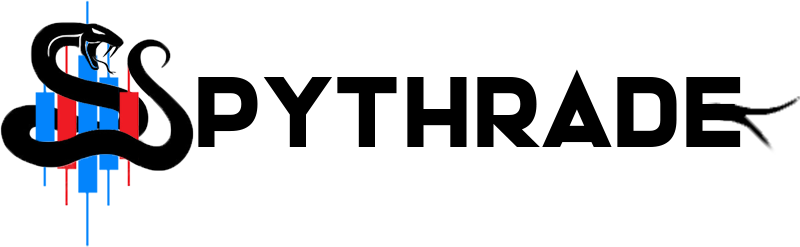
<style>
.page{position:relative;width:800px;height:247px;background:#ffffff}
.page>*{position:absolute;margin:0}
.t1{font:110px "Hardigan";color:#000000}
</style>
<div class="page">
<p class="t1" style="left:198px;top:69px;width:543px;height:78px">Pythrade</p>
</div>
